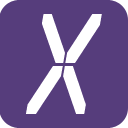
<style>
.page{position:relative;width:128px;height:128px;background:#563d7c}
.page>*{position:absolute;margin:0}
.t1{font:150px "LcdD";color:#ffffff}
</style>
<div class="page">
<p class="t1" style="left:26px;top:14px;width:76px;height:100px">x</p>
</div>
